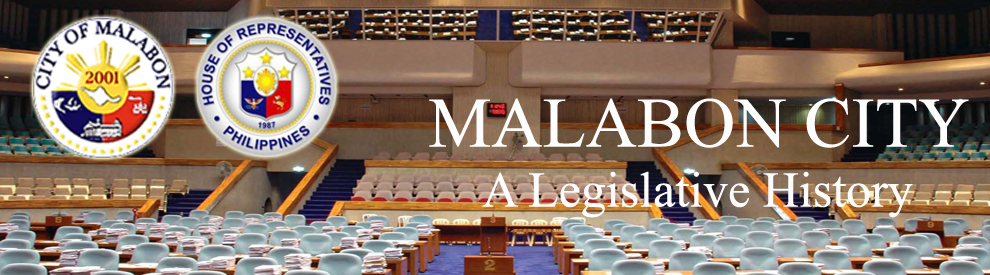
<style>
.page{position:relative;width:990px;height:275px}
.page>*{position:absolute;margin:0}
.t1{font:50px "TimesNewRomanPSMT";color:#fdfcfc}
.t2{font:70.8px "TimesNewRomanPSMT";color:#fdfdfd}
</style>
<div class="page">
<p class="t1" style="left:429px;top:98px;width:540px;height:120px;text-align:center"><span class="t2">MALABON CITY<br></span>A Legislative History</p>
</div>
